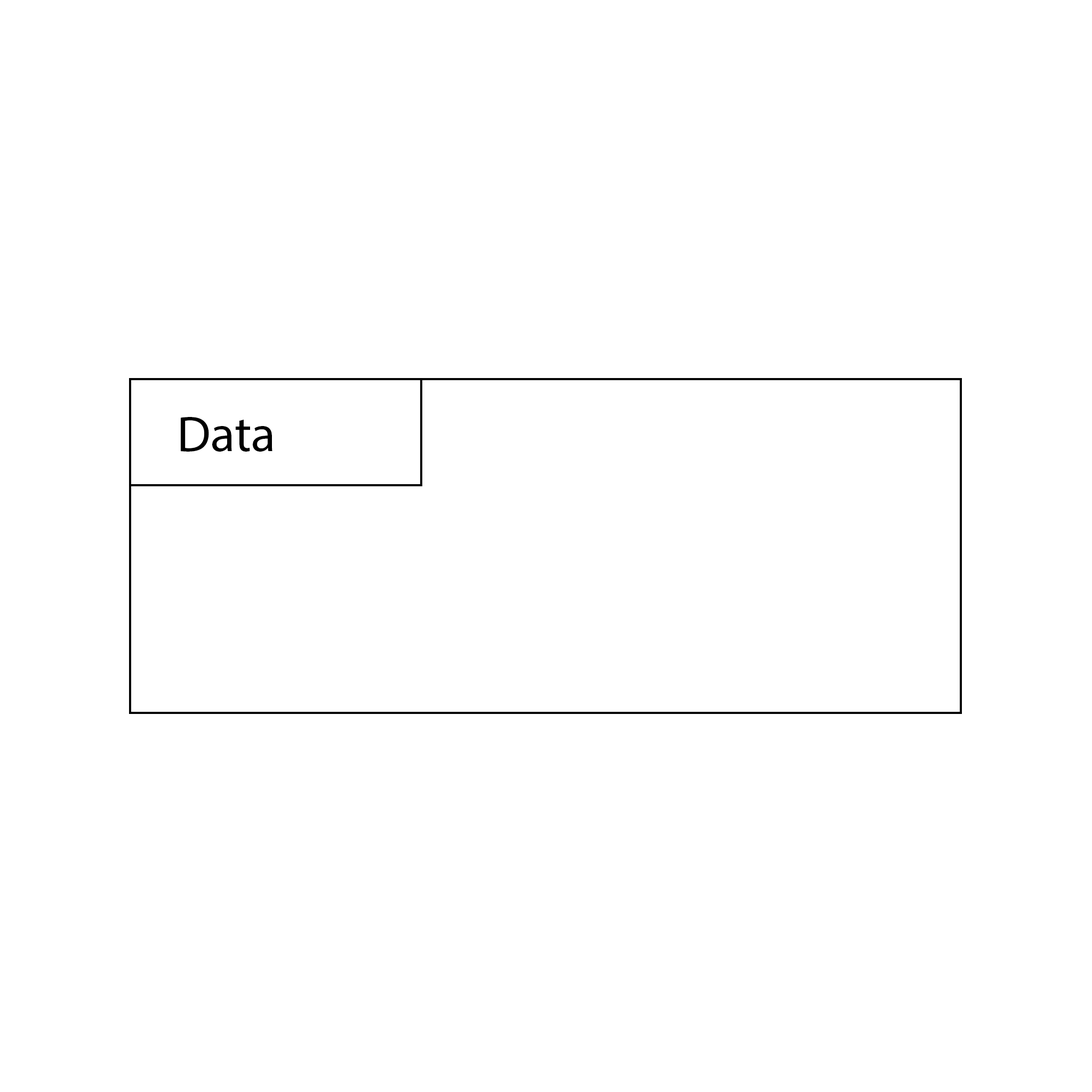
<style>
.page{position:relative;width:1092px;height:1092px;background:#ffffff}
.page>*{position:absolute;margin:0}
.t1{font:50.4px "MyriadPro-Regular";color:#000000}
</style>
<div class="page">
<p class="t1" style="left:181px;top:417px;width:91px;height:35px">Data</p>
</div>
